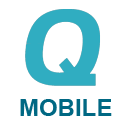
<style>
.page{position:relative;width:128px;height:128px;background:#ffffff}
.page>*{position:absolute;margin:0}
.t1{font:24px "Arial-BoldMT";color:#006883}
</style>
<div class="page">
<p class="t1" style="left:20px;top:99px;width:92px;height:17px">MOBILE</p>
</div>
